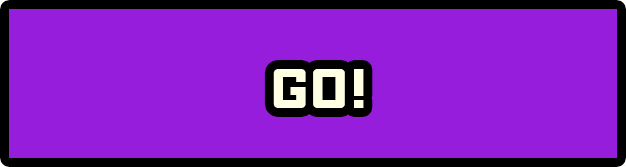
<style>
.page{position:relative;width:626px;height:167px;background:#971ddd}
.page>*{position:absolute;margin:0}
.t1{font:90px "ONRAMP";color:#ffffe3}
</style>
<div class="page">
<p class="t1" style="left:273px;top:69px;width:91px;height:39px">GO!</p>
</div>
